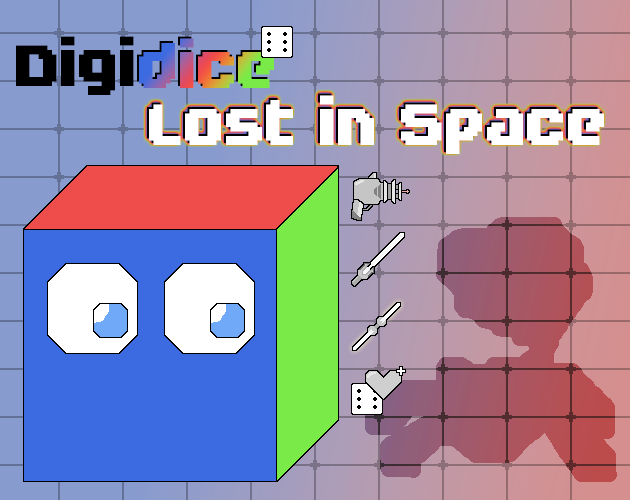
<style>
.page{position:relative;width:630px;height:500px}
.page>*{position:absolute;margin:0}
.t1{font:72px "FutilePro";color:#000000}
.t2{font:72px "FutilePro"}
.t3{font:72px "FutilePro";color:#ffffff}
</style>
<div class="page">
<p class="t1" style="left:16px;top:36px;width:118px;height:59px">Digi</p>
<p class="t2" style="left:137px;top:36px;width:135px;height:50px">dice</p>
<p class="t3" style="left:149px;top:95px;width:455px;height:59px">Lost in Space</p>
</div>
